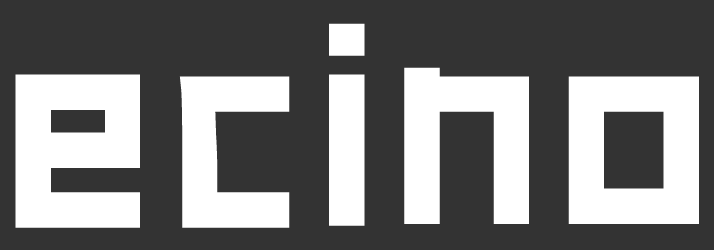
<style>
.page{position:relative;width:714px;height:250px;background:#333333}
.page>*{position:absolute;margin:0}
.t1{font:400px "RecinoStudio-Regular";color:#ffffff}
</style>
<div class="page">
<p class="t1" style="left:15px;top:23px;width:684px;height:205px">ecino</p>
</div>
